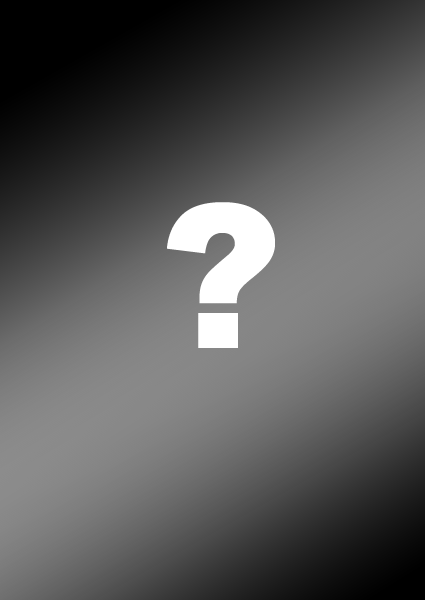
<style>
.page{position:relative;width:425px;height:600px}
.page>*{position:absolute;margin:0}
.t1{font:200px "Arial-Black";color:#ffffff}
</style>
<div class="page">
<p class="t1" style="left:166px;top:199px;width:108px;height:146px">?</p>
</div>
